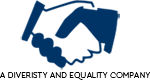
<style>
.page{position:relative;width:150px;height:80px;background:#ffffff}
.page>*{position:absolute;margin:0}
.t1{font:7.7px "FONTSPRINGDEMO-CeraLightRegular";color:#010000;scale:1.07 1}
</style>
<div class="page">
<p class="t1" style="left:0px;top:72px;width:150px;height:8px">A DIVERISTY AND EQUALITY COMPANY</p>
</div>
